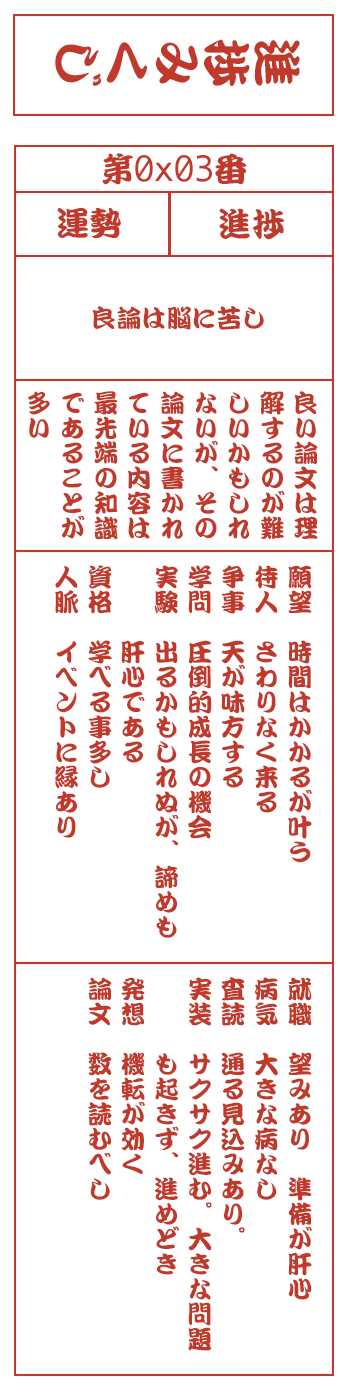
<style>
.page{position:relative;width:350px;height:1400px;background:#ffffff}
.page>*{position:absolute;margin:0}
.t1{font:50px "DFKanTeiRyu-XB-MP-RKSJ-H";color:#c0392b}
.t2{font:33.3px "Monaco";color:#c0392b}
.t3{font:33.3px "DFKanTeiRyu-XB-MP-RKSJ-H";color:#c0392b}
.t4{font:25px "DFKanTeiRyu-XB-MP-RKSJ-H";color:#c0392b}
.t5{font:25px/33.3px "DFKanTeiRyu-XB-MP-RKSJ-H";color:#c0392b}
</style>
<div class="page">
<p class="t1" style="left:55px;top:39px;width:245px;height:47px;rotate:90deg">進捗みくじ</p>
<p class="t2" style="left:102px;top:153px;width:144px;height:32px"><span class="t3">第</span>0x03<span class="t3">番</span></p>
<p class="t3" style="left:57px;top:207px;width:64px;height:31px">運勢</p>
<p class="t3" style="left:219px;top:208px;width:65px;height:32px">進捗</p>
<p class="t4" style="left:92px;top:306px;width:172px;height:24px">良論は脳に苦し</p>
<p class="t5" style="left:28px;top:391px;width:290px;height:149px">良い論文は理<br>解するのが難<br>しいかもしれ<br>ないが、その<br>論文に書かれ<br>ている内容は<br>最先端の知識<br>であることが<br>多い</p>
<p class="t5" style="left:55px;top:565px;width:257px;height:373px">願望　時間はかかるが叶う<br>待人　さわりなく来る<br>争事　天が味方する<br>学問　圧倒的成長の機会<br>実験　出るかもしれぬが、諦めも<br>　　　肝心である<br>資格　学べる事多し<br>人脈　イベントに縁あり</p>
<p class="t5" style="left:88px;top:977px;width:224px;height:374px">就職　望みあり　準備が肝心<br>病気　大きな病なし<br>査読　通る見込みあり。<br>実装　サクサク進む。大きな問題<br>　　　も起きず、進めどき<br>発想　機転が効く<br>論文　数を読むべし</p>
</div>
